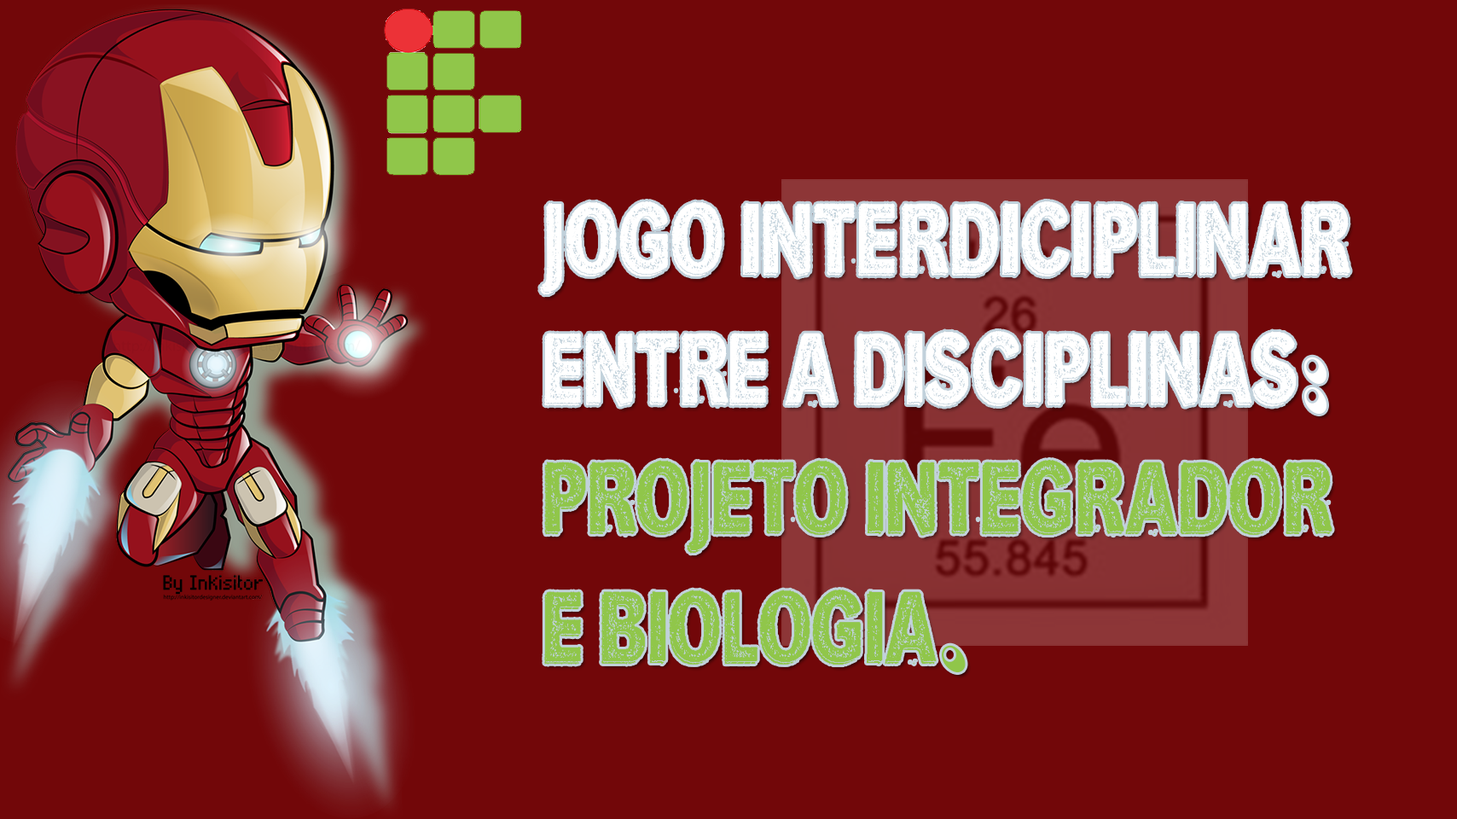
<style>
.page{position:relative;width:1457px;height:819px;background:#720709}
.page>*{position:absolute;margin:0}
.t1{font:107.8px "SheRocks";color:#ffffff}
.t2{font:107.8px "RosewoodStd-Regular";color:#ffffff}
.t3{font:107.8px "SheRocks";color:#90c64a}
.t4{font:107.8px "RosewoodStd-Regular";color:#90c64a}
</style>
<div class="page">
<p class="t1" style="left:540px;top:200px;width:810px;height:473px">jOGO INTERDICIPLINAR <br>ENTRE A DISCIPLINAS<span class="t2">:<br></span><span class="t3">PROJETO INTEGRADOR<br>E BIOLOGIA</span><span class="t4">.</span></p>
</div>
